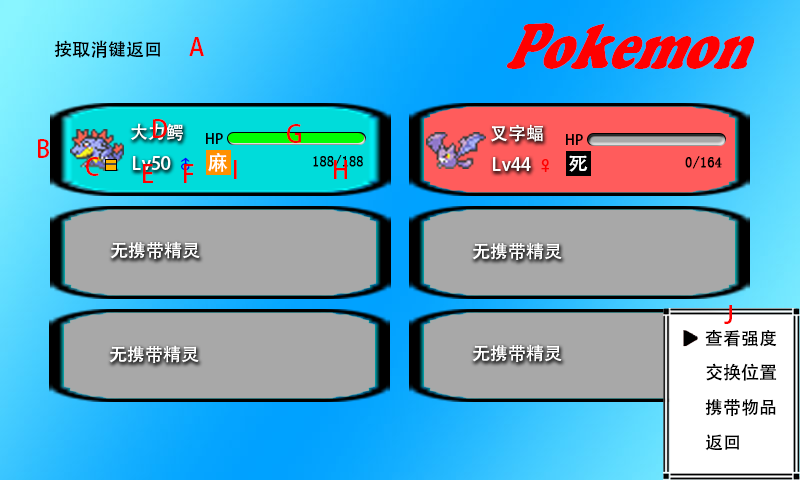
<style>
.page{position:relative;width:800px;height:480px;background:#a8a8a8}
.page>*{position:absolute;margin:0}
.t1{font:68.5px "CooperBlackStd";color:#ff0000;scale:0.7 1}
.t2{font:18px "AdobeHeitiStd-Regular";color:#000000}
.t3{font:24px "AdobeHeitiStd-Regular";color:#ff0000}
.t4{font:18px "AdobeHeitiStd-Regular";color:#ffffff}
.t5{font:14px "AdobeHeitiStd-Regular";color:#000000}
.t6{font:18px "AdobeHeitiStd-Regular";font-weight:bold}
.t7{font:14px "SimSun";color:#000000;font-weight:bold}
</style>
<div class="page">
<p class="t1" style="left:506px;top:23px;width:249px;height:46px">Pokemon</p>
<p class="t2" style="left:54px;top:40px;width:106px;height:18px">按取消键返回</p>
<p class="t3" style="left:189px;top:37px;width:15px;height:19px">A</p>
<p class="t4" style="left:131px;top:123px;width:52px;height:18px">大力鳄</p>
<p class="t3" style="left:153px;top:119px;width:14px;height:19px">D</p>
<p class="t3" style="left:287px;top:124px;width:14px;height:19px">G</p>
<p class="t4" style="left:491px;top:124px;width:52px;height:18px">叉字蝠</p>
<p class="t5" style="left:206px;top:133px;width:17px;height:11px">HP</p>
<p class="t5" style="left:566px;top:134px;width:17px;height:11px">HP</p>
<p class="t3" style="left:38px;top:139px;width:11px;height:19px">B</p>
<p class="t3" style="left:86px;top:157px;width:13px;height:19px">C</p>
<p class="t4" style="left:133px;top:156px;width:38px;height:14px">Lv50</p>
<p class="t6" style="left:180px;top:157px;width:10px;height:14px">♂</p>
<p class="t3" style="left:234px;top:160px;width:3px;height:19px">I</p>
<p class="t7" style="left:313px;top:155px;width:50px;height:13px">188/188</p>
<p class="t3" style="left:334px;top:160px;width:13px;height:19px">H</p>
<p class="t4" style="left:493px;top:157px;width:38px;height:14px">Lv44</p>
<p class="t7" style="left:685px;top:156px;width:37px;height:13px">0/164</p>
<p class="t3" style="left:143px;top:164px;width:10px;height:19px">E</p>
<p class="t3" style="left:184px;top:164px;width:10px;height:19px">F</p>
<p class="t4" style="left:110px;top:241px;width:90px;height:18px">无携带精灵</p>
<p class="t4" style="left:472px;top:242px;width:90px;height:18px">无携带精灵</p>
<p class="t3" style="left:724px;top:305px;width:8px;height:19px">J</p>
<p class="t2" style="left:705px;top:330px;width:72px;height:17px">查看强度</p>
<p class="t4" style="left:109px;top:345px;width:90px;height:18px">无携带精灵</p>
<p class="t4" style="left:472px;top:344px;width:90px;height:18px">无携带精灵</p>
<p class="t2" style="left:706px;top:363px;width:71px;height:18px">交换位置</p>
<p class="t2" style="left:705px;top:399px;width:71px;height:17px">携带物品</p>
<p class="t2" style="left:705px;top:434px;width:34px;height:17px">返回</p>
</div>
